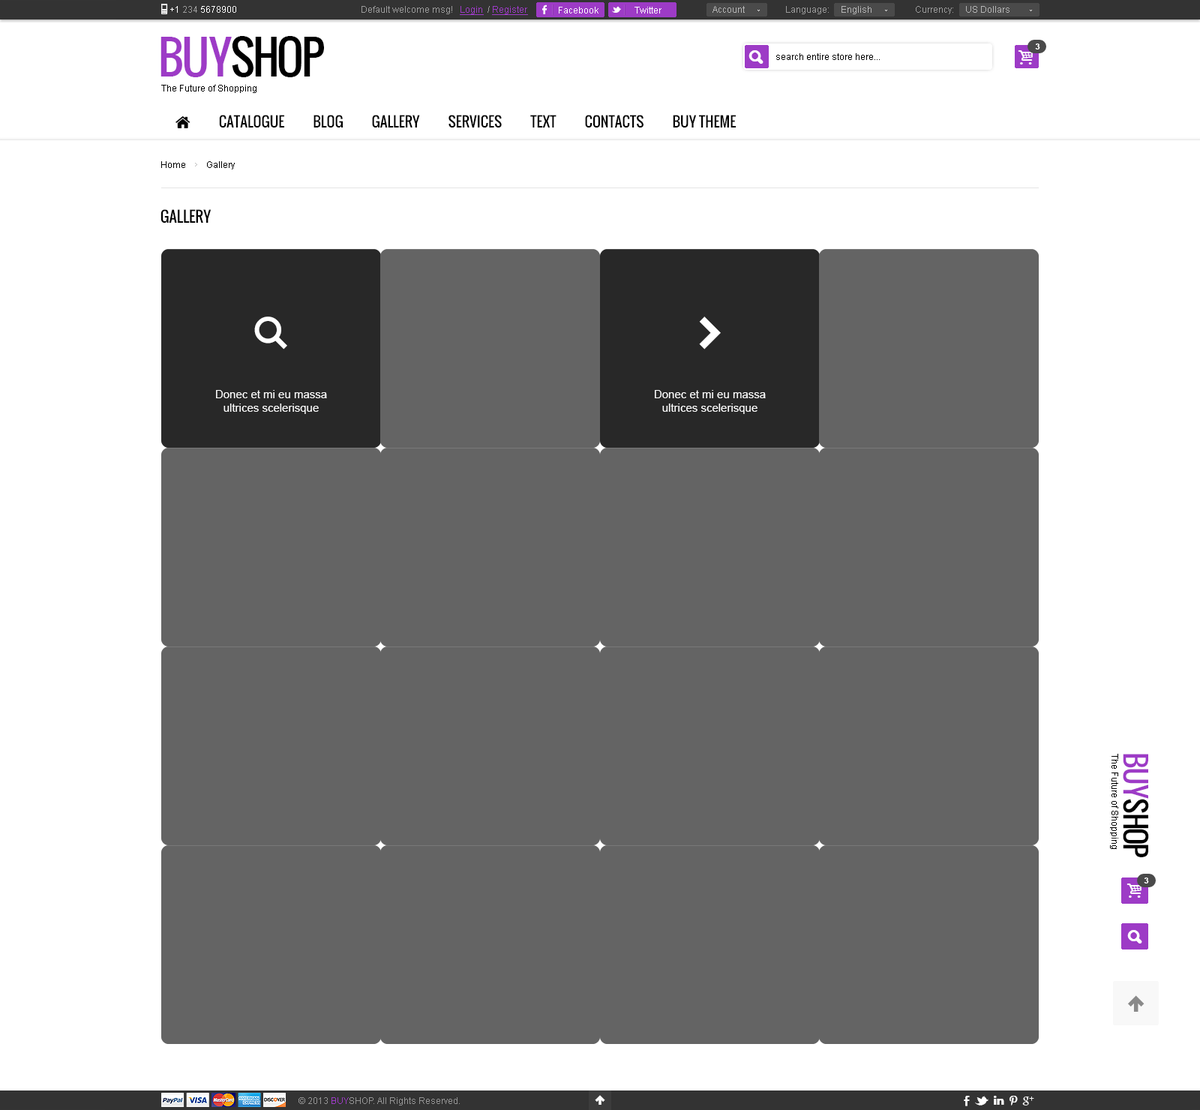
<style>
.page{position:relative;width:1200px;height:1110px;background:#646464}
.page>*{position:absolute;margin:0}
.t1{font:9px "ArialMT";color:#ffffff}
.t2{font:9px "ArialMT";color:#9b9b9b}
.t3{font:9px "ArialMT";color:#9d3bc6;text-decoration:underline}
.t4{font:9px "ArialMT";color:#b6b6b6}
.t5{font:45px "Oswald";letter-spacing:-0.06em;color:#000000;text-transform:uppercase}
.t6{font:45px "Oswald";letter-spacing:-0.06em;color:#9d3bc6;text-transform:uppercase}
.t7{font:9px "ArialMT";color:#000000}
.t8{font:8.2px "Arial-BoldMT";color:#ffffff;text-transform:uppercase}
.t9{font:15px "Oswald";color:#000000;text-transform:uppercase}
.t10{font:11.2px "ArialMT";color:#ffffff}
.t11{font:28.5px "Oswald";letter-spacing:-0.06em;color:#000000;text-transform:uppercase}
.t12{font:28.5px "Oswald";letter-spacing:-0.06em;color:#9d3bc6;text-transform:uppercase}
.t13{font:9px "ArialMT";color:#959595}
.t14{font:9px "ArialMT";color:#9d3bc6}
</style>
<div class="page">
<p class="t1" style="left:170px;top:6px;width:66px;height:7px">+1 <span class="t2">234 </span>5678900</p>
<p class="t2" style="left:362px;top:6px;width:166px;height:9px">Default welcome msg!   <span class="t3">Login </span> / <span class="t3">Register</span></p>
<p class="t2" style="left:362px;top:6px;width:166px;height:9px">Default welcome msg!   <span class="t3">Login </span> / <span class="t3">Register</span></p>
<p class="t4" style="left:712px;top:6px;width:33px;height:7px">Account</p>
<p class="t2" style="left:786px;top:6px;width:86px;height:8px">Language:     <span class="t4">English</span></p>
<p class="t4" style="left:916px;top:6px;width:94px;height:8px"><span class="t2">Currency:     </span>US Dollars</p>
<p class="t1" style="left:559px;top:7px;width:39px;height:7px">Facebook</p>
<p class="t1" style="left:634px;top:7px;width:28px;height:7px">Twitter</p>
<p class="t5" style="left:160px;top:36px;width:164px;height:41px"><span class="t6">buy</span>shop</p>
<p class="t7" style="left:776px;top:53px;width:104px;height:7px">search entire store here...</p>
<p class="t8" style="left:1035px;top:44px;width:5px;height:6px">3</p>
<p class="t7" style="left:161px;top:85px;width:95px;height:8px">The Future of Shopping</p>
<p class="t7" style="left:161px;top:161px;width:74px;height:9px">Home         Gallery</p>
<p class="t9" style="left:160px;top:209px;width:52px;height:15px">GALLERY</p>
<p class="t10" style="left:216px;top:390px;width:111px;height:24px;text-align:center">Donec et mi eu massa<br>ultrices scelerisque</p>
<p class="t10" style="left:655px;top:390px;width:111px;height:24px;text-align:center">Donec et mi eu massa<br>ultrices scelerisque</p>
<p class="t7" style="left:1110px;top:754px;width:8px;height:95px;rotate:90deg">The Future of Shopping</p>
<p class="t11" style="left:1123px;top:754px;width:26px;height:103px;rotate:90deg"><span class="t12">buy</span>shop</p>
<p class="t8" style="left:1144px;top:878px;width:5px;height:6px">3</p>
<p class="t13" style="left:298px;top:1097px;width:162px;height:9px">© 2013 <span class="t14">BUY</span>SHOP. All Rights Reserved.</p>
</div>
